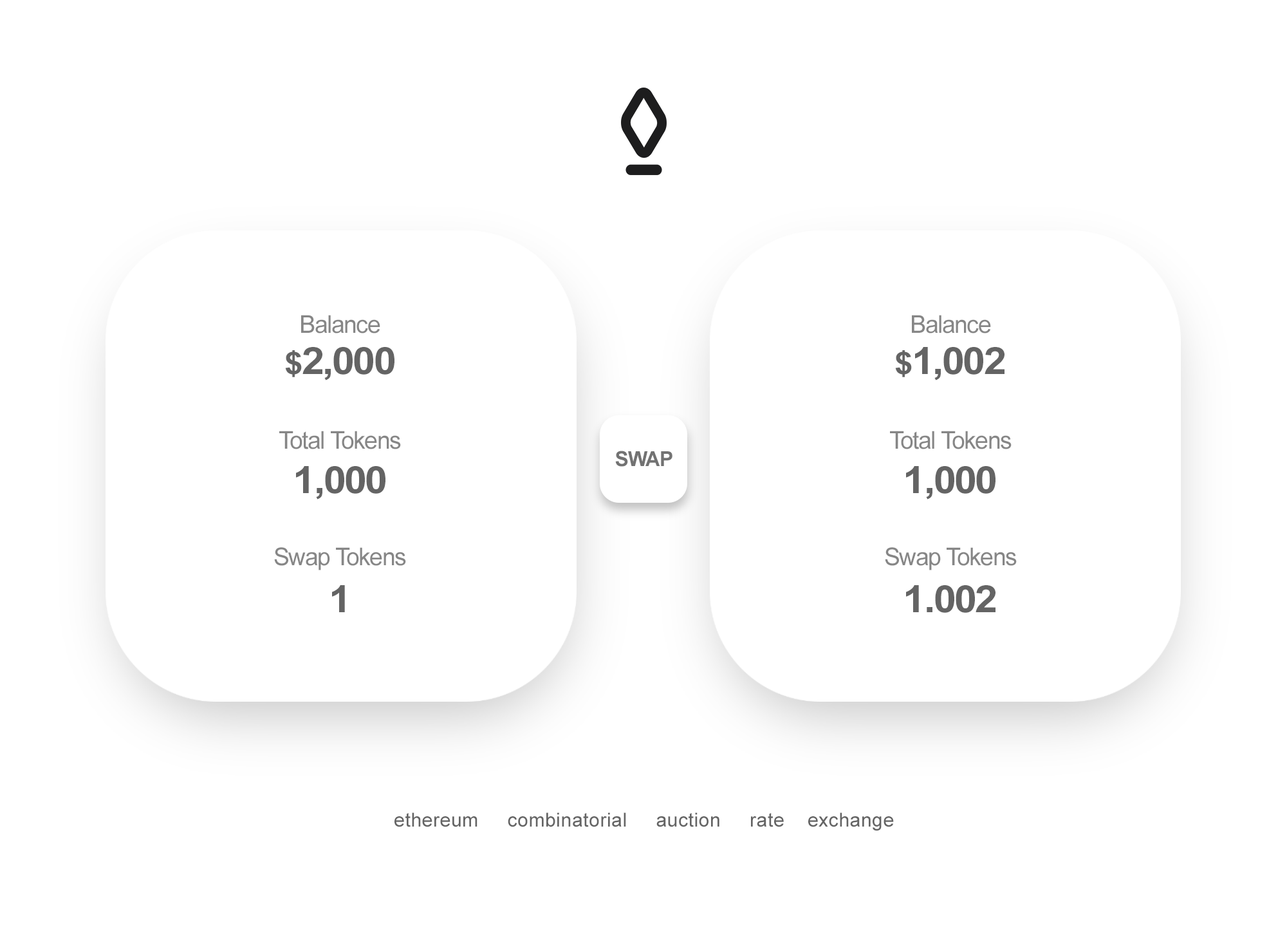
<style>
.page{position:relative;width:1287px;height:927px;background:#ffffff}
.page>*{position:absolute;margin:0}
.t1{font:24.5px/29.1px "ArialMT";letter-spacing:-0.04em;color:#868686}
.t2{font:37.5px/29.7px "Arial-BoldMT";letter-spacing:-0.04em;color:#646464;scale:1.08 1}
.t3{font:30.9px/29.7px "Arial-BoldMT";letter-spacing:-0.04em;color:#646464;scale:1.08 1}
.t4{font:20.6px "Arial-BoldMT";letter-spacing:-0.04em;color:#727272}
.t5{font:19.3px "ArialMT";letter-spacing:0.02em;color:#646464}
</style>
<div class="page">
<p class="t1" style="left:274px;top:315px;width:132px;height:255px;text-align:center">Balance<br><br><br><br>Total Tokens<br><br><br><br>Swap Tokens</p>
<p class="t1" style="left:885px;top:315px;width:132px;height:255px;text-align:center">Balance<br><br><br><br>Total Tokens<br><br><br><br>Swap Tokens</p>
<p class="t2" style="left:285px;top:347px;width:109px;height:265px;text-align:center"><span class="t3">$</span>2,000<br><br><br><br>1,000<br><br><br><br>1</p>
<p class="t2" style="left:895px;top:347px;width:109px;height:266px;text-align:center"><span class="t3">$</span>1,002<br><br><br><br>1,000<br><br><br><br>1.002</p>
<p class="t4" style="left:615px;top:450px;width:57px;height:17px">SWAP</p>
<p class="t5" style="left:394px;top:812px;width:500px;height:19px">ethereum     combinatorial     auction     rate    exchange</p>
</div>
